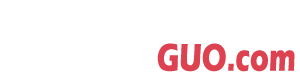
<style>
.page{position:relative;width:300px;height:77px;background:#ffffff}
.page>*{position:absolute;margin:0}
.t1{font:40px "ErasITC-Bold";color:#dd4250;scale:0.72 1}
</style>
<div class="page">
<p class="t1" style="left:157px;top:43px;width:138px;height:29px">GUO.com</p>
</div>
